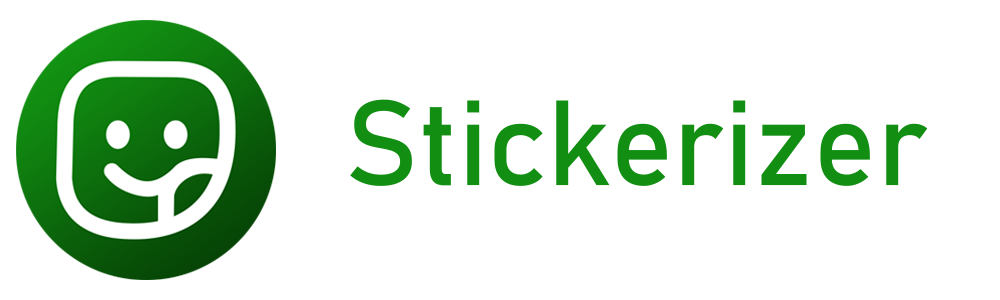
<style>
.page{position:relative;width:1000px;height:300px;background:#ffffff}
.page>*{position:absolute;margin:0}
.t1{font:119px "Bahnschrift";color:#128e12}
</style>
<div class="page">
<p class="t1" style="left:350px;top:99px;width:578px;height:87px">Stickerizer</p>
</div>
